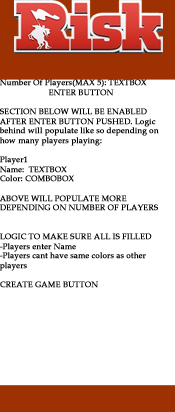
<style>
.page{position:relative;width:175px;height:412px;background:#ffffff}
.page>*{position:absolute;margin:0}
.t1{font:8px "PalatinoLinotype-Roman";color:#000000;font-weight:bold}
</style>
<div class="page">
<p class="t1" style="left:0px;top:79px;width:159px;height:209px">Number Of Players(MAX 5): TEXTBOX<br>                      ENTER BUTTON<br><br>SECTION BELOW WILL BE ENABLED AFTER ENTER BUTTON PUSHED. Logic behind will populate like so depending on how many players playing:<br><br>Player1<br>Name:  TEXTBOX<br>Color: COMBOBOX<br><br>ABOVE WILL POPULATE MORE DEPENDING ON NUMBER OF PLAYERS<br><br><br>LOGIC TO MAKE SURE ALL IS FILLED<br>-Players enter Name<br>-Players cant have same colors as other players<br><br>CREATE GAME BUTTON</p>
</div>
